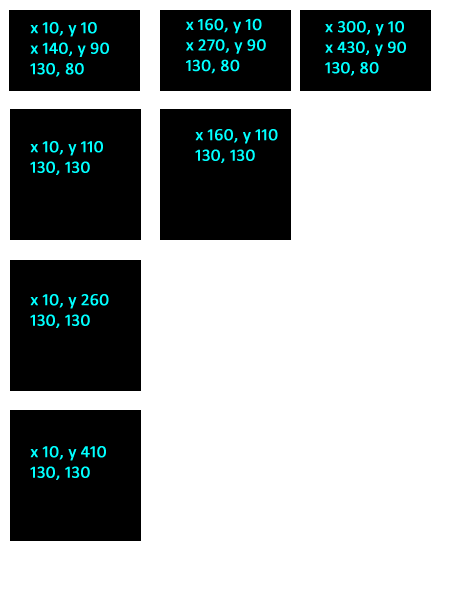
<style>
.page{position:relative;width:450px;height:600px;background:#ffffff}
.page>*{position:absolute;margin:0}
.t1{font:17.1px "Calibri";color:#00ffff;font-weight:bold}
</style>
<div class="page">
<p class="t1" style="left:30px;top:22px;width:79px;height:55px">x 10, y 10<br>x 140, y 90<br>130, 80</p>
<p class="t1" style="left:186px;top:18px;width:80px;height:56px">x 160, y 10<br>x 270, y 90<br>130, 80</p>
<p class="t1" style="left:325px;top:21px;width:81px;height:55px">x 300, y 10<br>x 430, y 90<br>130, 80</p>
<p class="t1" style="left:195px;top:129px;width:83px;height:34px">x 160, y 110<br>130, 130</p>
<p class="t1" style="left:30px;top:141px;width:73px;height:34px">x 10, y 110<br>130, 130</p>
<p class="t1" style="left:30px;top:294px;width:79px;height:34px">x 10, y 260<br>130, 130</p>
<p class="t1" style="left:30px;top:446px;width:76px;height:34px">x 10, y 410<br>130, 130</p>
</div>
